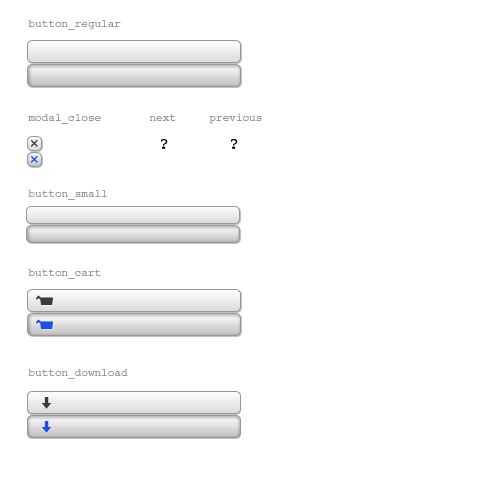
<style>
.page{position:relative;width:500px;height:500px;background:#ffffff}
.page>*{position:absolute;margin:0}
.t1{font:11px "Courier"}
.t2{font:11px "Courier";color:#7f7f7f}
.t3{font:17px "Futura";color:#3a3a3a}
.t4{font:17px "Courier";color:#000000}
.t5{font:17px "Futura";color:#1a4cef}
</style>
<div class="page">
<p class="t1" style="left:28px;top:20px;width:93px;height:10px">button_regular</p>
<p class="t1" style="left:209px;top:113px;width:53px;height:11px">previous</p>
<p class="t1" style="left:28px;top:114px;width:73px;height:10px">modal_close</p>
<p class="t2" style="left:150px;top:114px;width:26px;height:7px">next</p>
<p class="t3" style="left:30px;top:139px;width:8px;height:8px;rotate:45deg">+</p>
<p class="t4" style="left:161px;top:139px;width:7px;height:10px">?</p>
<p class="t4" style="left:231px;top:139px;width:7px;height:10px">?</p>
<p class="t5" style="left:30px;top:155px;width:8px;height:8px;rotate:45deg">+</p>
<p class="t1" style="left:28px;top:190px;width:79px;height:10px">button_small</p>
<p class="t1" style="left:28px;top:269px;width:73px;height:10px">button_cart</p>
<p class="t1" style="left:28px;top:369px;width:100px;height:10px">button_download</p>
</div>
